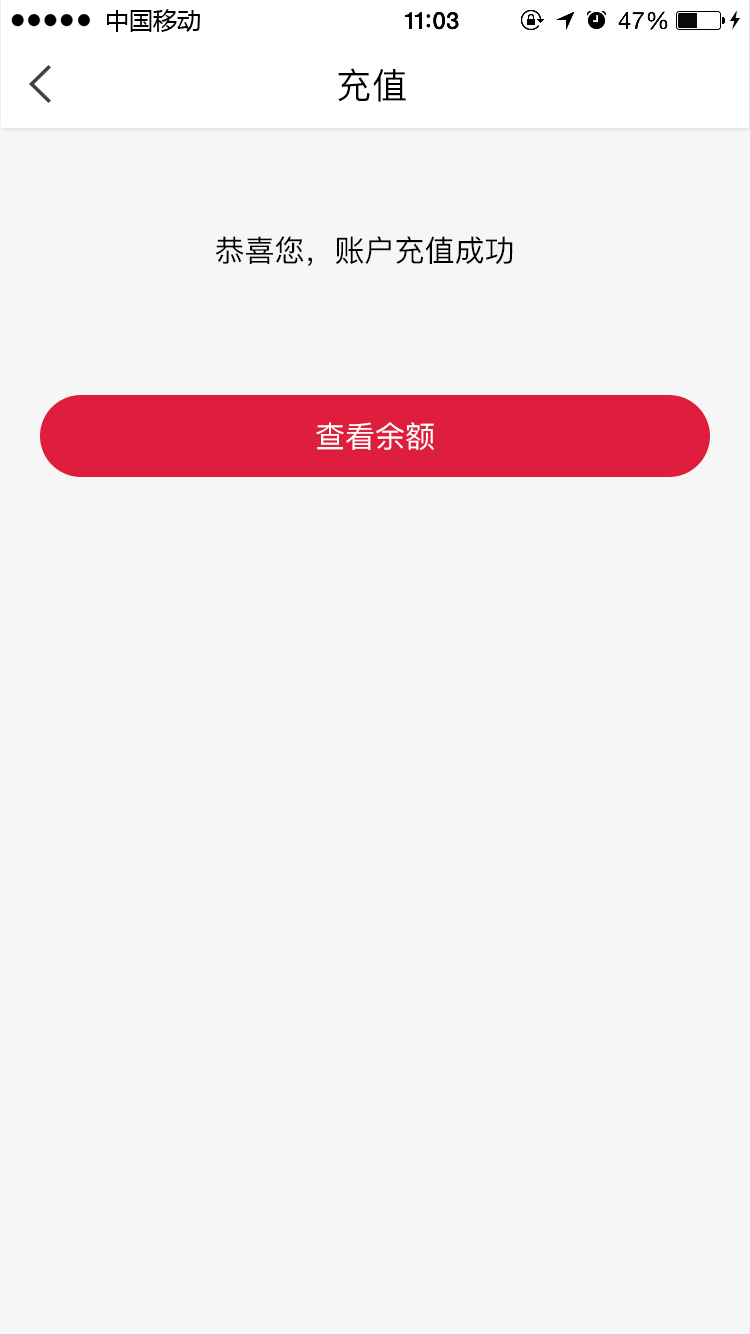
<style>
.page{position:relative;width:750px;height:1334px;background:#f6f6f6}
.page>*{position:absolute;margin:0}
.t1{font:35.7px "PingFang-SC-Medium";color:#000000}
.t2{font:30px "PingFang-SC-Medium";color:#000000}
.t3{font:30px "PingFang-SC-Medium";color:#ffffff}
</style>
<div class="page">
<p class="t1" style="left:338px;top:68px;width:68px;height:34px">充值</p>
<p class="t2" style="left:215px;top:236px;width:298px;height:30px">恭喜您，账户充值成功</p>
<p class="t3" style="left:316px;top:422px;width:118px;height:28px">查看余额</p>
</div>
